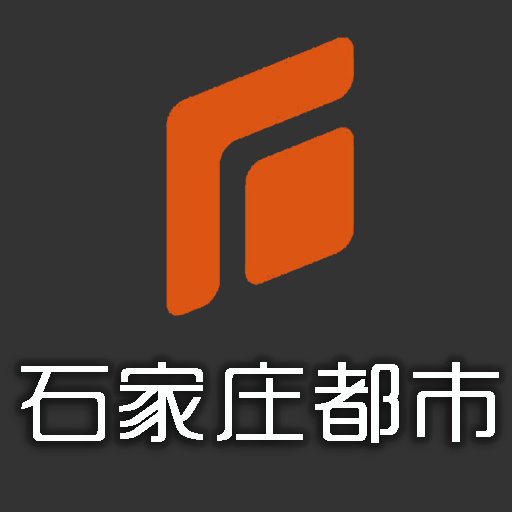
<style>
.page{position:relative;width:512px;height:512px;background:#333333}
.page>*{position:absolute;margin:0}
.t1{font:93.3px "SJshishang-Regular";letter-spacing:0.02em;color:#fcfdfd;font-weight:bold}
</style>
<div class="page">
<p class="t1" style="left:21px;top:362px;width:478px;height:81px">石家庄都市</p>
</div>
